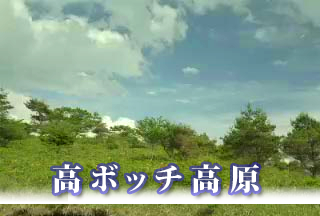
<style>
.page{position:relative;width:320px;height:216px}
.page>*{position:absolute;margin:0}
.t1{font:30px "KozMinPr6N-Heavy";letter-spacing:0.3em;color:#ffffff}
.t2{font:30px "KozMinPr6N-Heavy";letter-spacing:0.24em;color:#ffffff}
.t3{font:30px "KozMinPr6N-Heavy";letter-spacing:0.06em;color:#ffffff}
.t4{font:30px "KozMinPr6N-Heavy";letter-spacing:0.08em;color:#ffffff}
.t5{font:30px "KozMinPr6N-Heavy";letter-spacing:0.26em;color:#ffffff}
</style>
<div class="page">
<p class="t1" style="left:52px;top:164px;width:207px;height:29px"><span class="t2">高</span><span class="t3">ボ</span><span class="t4">ッ</span><span class="t5">チ</span>高原</p>
</div>
